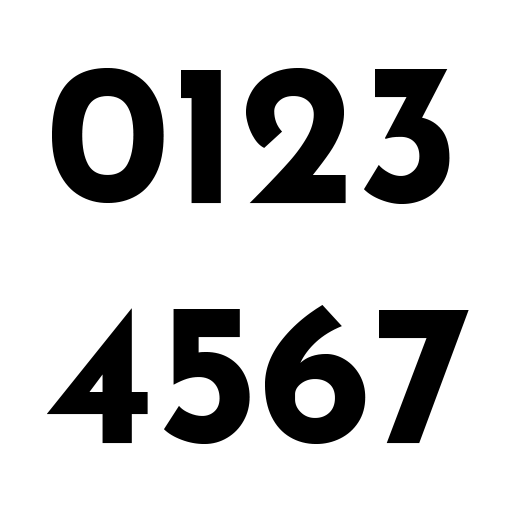
<style>
.page{position:relative;width:512px;height:512px;background:#ffffff}
.page>*{position:absolute;margin:0}
.t1{font:200px "JosefinSans-Bold";color:#000000}
</style>
<div class="page">
<p class="t1" style="left:47px;top:68px;width:422px;height:376px">0123<br>4567</p>
</div>
